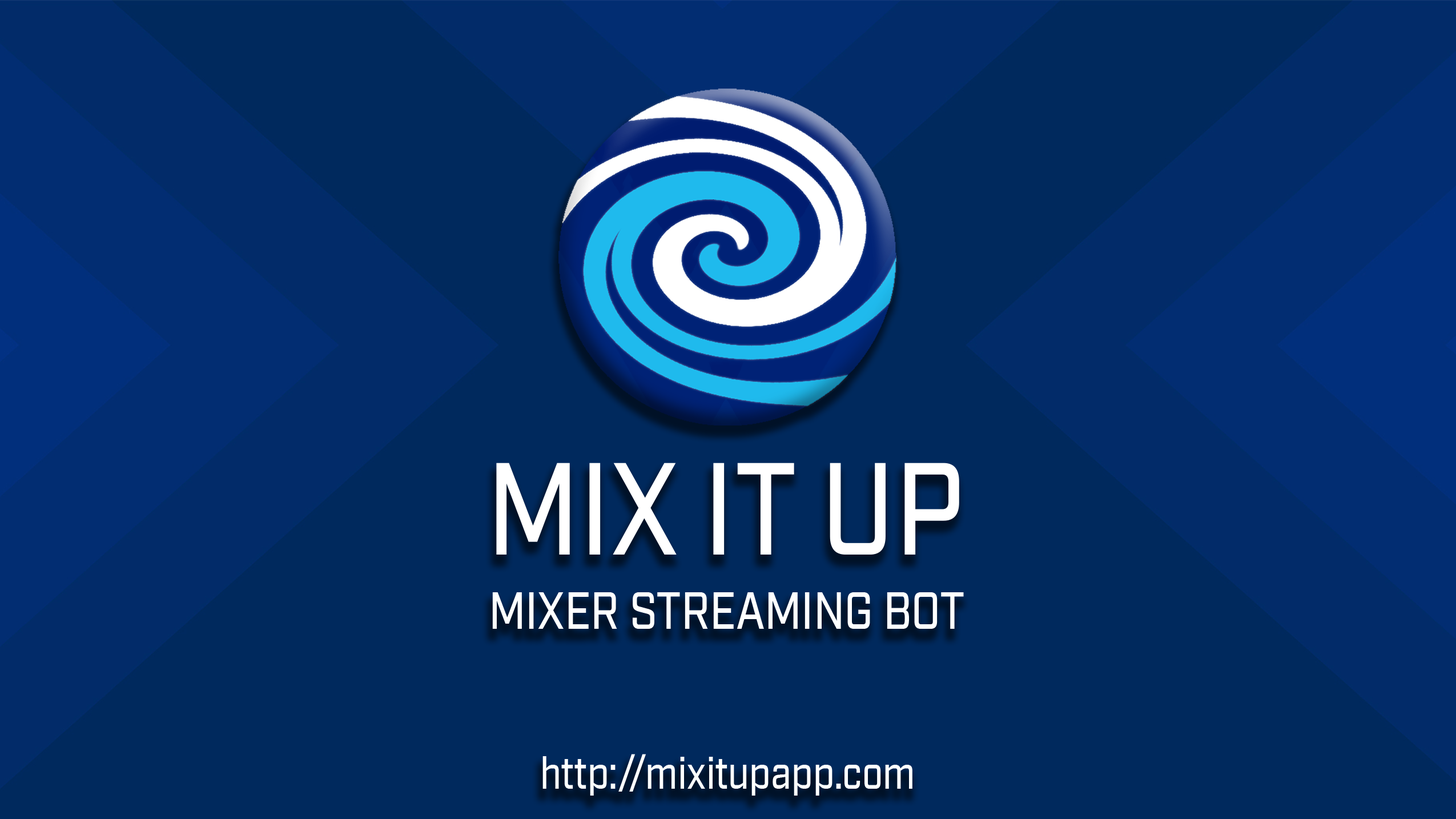
<style>
.page{position:relative;width:1456px;height:819px;background:#00295d}
.page>*{position:absolute;margin:0}
.t1{font:130.5px "Industry-Medium";color:#ffffff;scale:0.85 1}
.t2{font:51.4px "Industry-Medium";color:#ffffff;scale:0.85 1}
.t3{font:44px "Industry-Medium";color:#ffffff;scale:0.85 1}
</style>
<div class="page">
<p class="t1" style="left:496px;top:463px;width:463px;height:91px">MIX IT UP</p>
<p class="t2" style="left:492px;top:592px;width:472px;height:37px">MIXER STREAMING BOT</p>
<p class="t3" style="left:542px;top:754px;width:371px;height:41px">http://mixitupapp.com</p>
</div>
